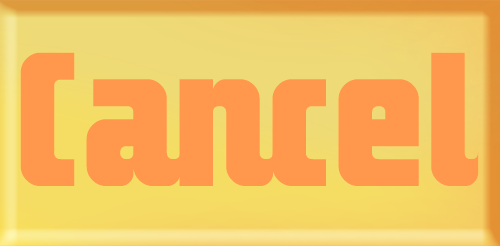
<style>
.page{position:relative;width:500px;height:246px;background:#ff974c}
.page>*{position:absolute;margin:0}
.t1{font:266.7px "Makimango";color:#ff974c}
</style>
<div class="page">
<p class="t1" style="left:20px;top:52px;width:459px;height:134px">Cancel</p>
<p class="t1" style="left:20px;top:52px;width:459px;height:134px">Cancel</p>
</div>
